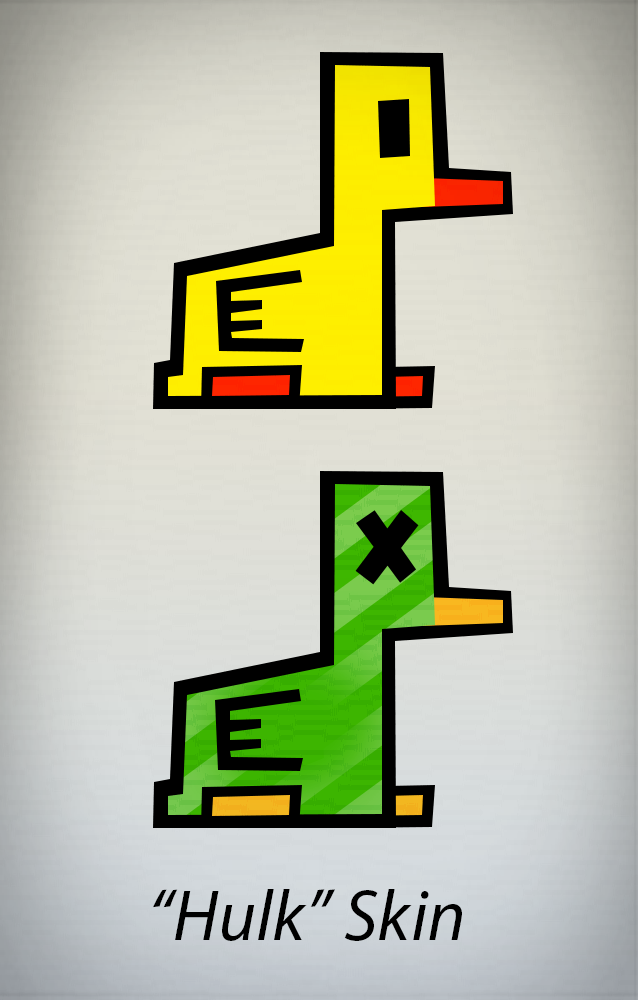
<style>
.page{position:relative;width:638px;height:1000px}
.page>*{position:absolute;margin:0}
.t1{font:72px "MyriadPro-It";color:#000000}
</style>
<div class="page">
<p class="t1" style="left:153px;top:889px;width:309px;height:52px">“Hulk” Skin</p>
</div>
